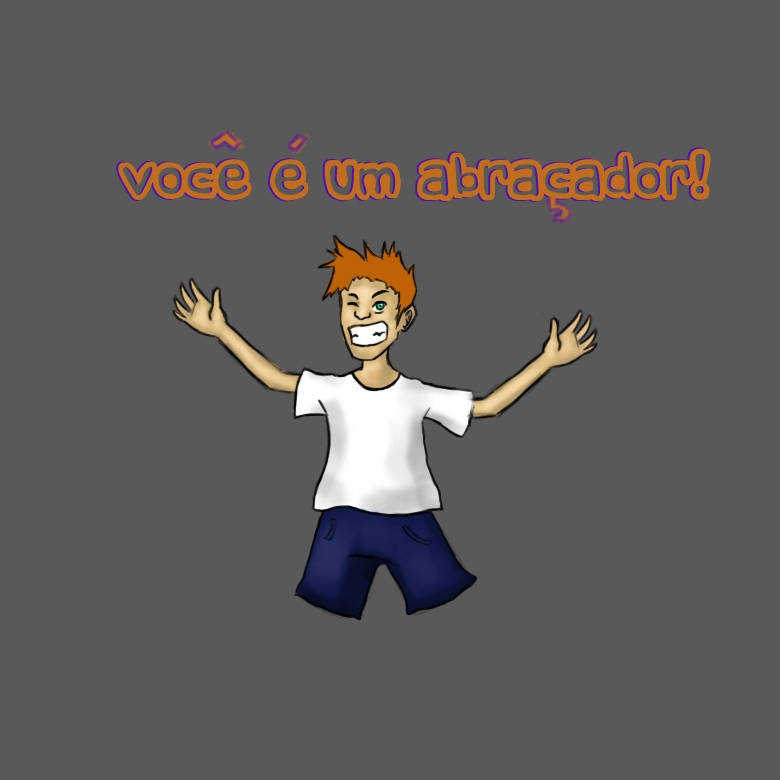
<style>
.page{position:relative;width:780px;height:780px;background:#595959}
.page>*{position:absolute;margin:0}
.t1{font:90px "comicandy";color:#c06e1e}
</style>
<div class="page">
<p class="t1" style="left:118px;top:148px;width:593px;height:53px">Voce e um abracador!</p>
</div>
